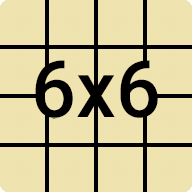
<style>
.page{position:relative;width:192px;height:192px;background:#efe3af}
.page>*{position:absolute;margin:0}
.t1{font:79.2px "Roboto-Medium";color:#000000}
</style>
<div class="page">
<p class="t1" style="left:35px;top:60px;width:123px;height:58px">6x6</p>
</div>
